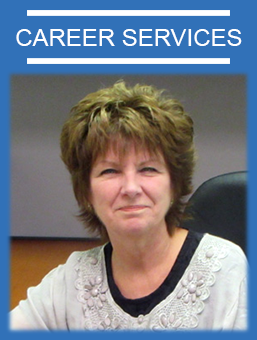
<style>
.page{position:relative;width:257px;height:340px}
.page>*{position:absolute;margin:0}
.t1{font:24.2px "ArialMT";color:#ffffff}
</style>
<div class="page">
<p class="t1" style="left:16px;top:29px;width:226px;height:17px">CAREER SERVICES</p>
</div>
